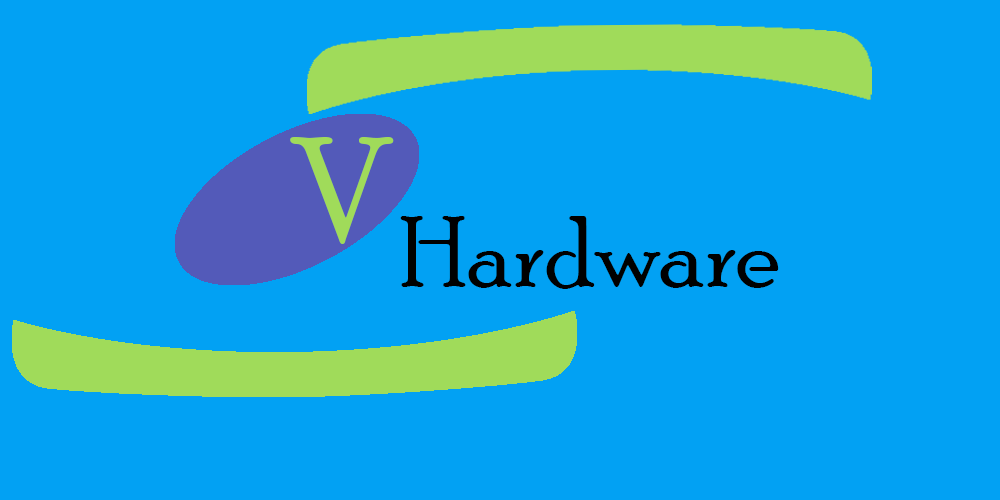
<style>
.page{position:relative;width:1000px;height:500px;background:#02a1f3}
.page>*{position:absolute;margin:0}
.t1{font:100px "PoorRichard-Regular";color:#000000}
</style>
<div class="page">
<p class="t1" style="left:400px;top:216px;width:379px;height:73px">Hardware</p>
</div>
